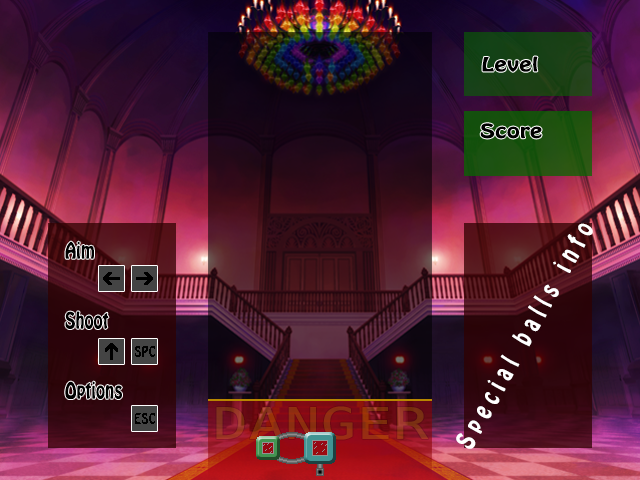
<style>
.page{position:relative;width:640px;height:480px}
.page>*{position:absolute;margin:0}
.t1{font:17.2px "HoboStd";letter-spacing:0.02em;color:#000000;scale:1.33 1}
.t2{font:23.1px "HoboStd";letter-spacing:0.36em;color:#ffffff;scale:0.8 1}
.t3{font:20px "HoboStd";letter-spacing:0.02em;color:#000000;scale:0.8 1}
.t4{font:43.5px "DejaVuSansMono";letter-spacing:0.02em;color:#8f3013;scale:1.33 1}
</style>
<div class="page">
<p class="t1" style="left:482px;top:56px;width:56px;height:16px">Level</p>
<p class="t1" style="left:480px;top:123px;width:62px;height:16px">Score</p>
<p class="t2" style="left:456px;top:223px;width:137px;height:226px;rotate:-61deg">Special balls info</p>
<p class="t3" style="left:65px;top:241px;width:29px;height:18px">Aim</p>
<p class="t3" style="left:65px;top:311px;width:44px;height:18px">Shoot</p>
<p class="t3" style="left:65px;top:381px;width:57px;height:18px">Options</p>
<p class="t4" style="left:216px;top:406px;width:213px;height:34px">DANGER</p>
</div>
